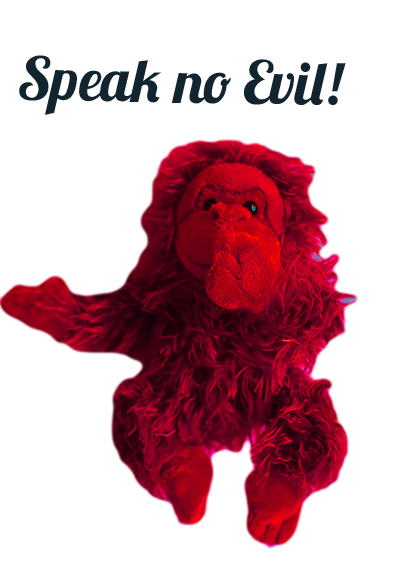
<style>
.page{position:relative;width:400px;height:569px;background:#ffffff}
.page>*{position:absolute;margin:0}
.t1{font:60px "Lobster1.3";color:#122430}
</style>
<div class="page">
<p class="t1" style="left:19px;top:55px;width:327px;height:60px;rotate:1deg">Speak no Evil!</p>
</div>
